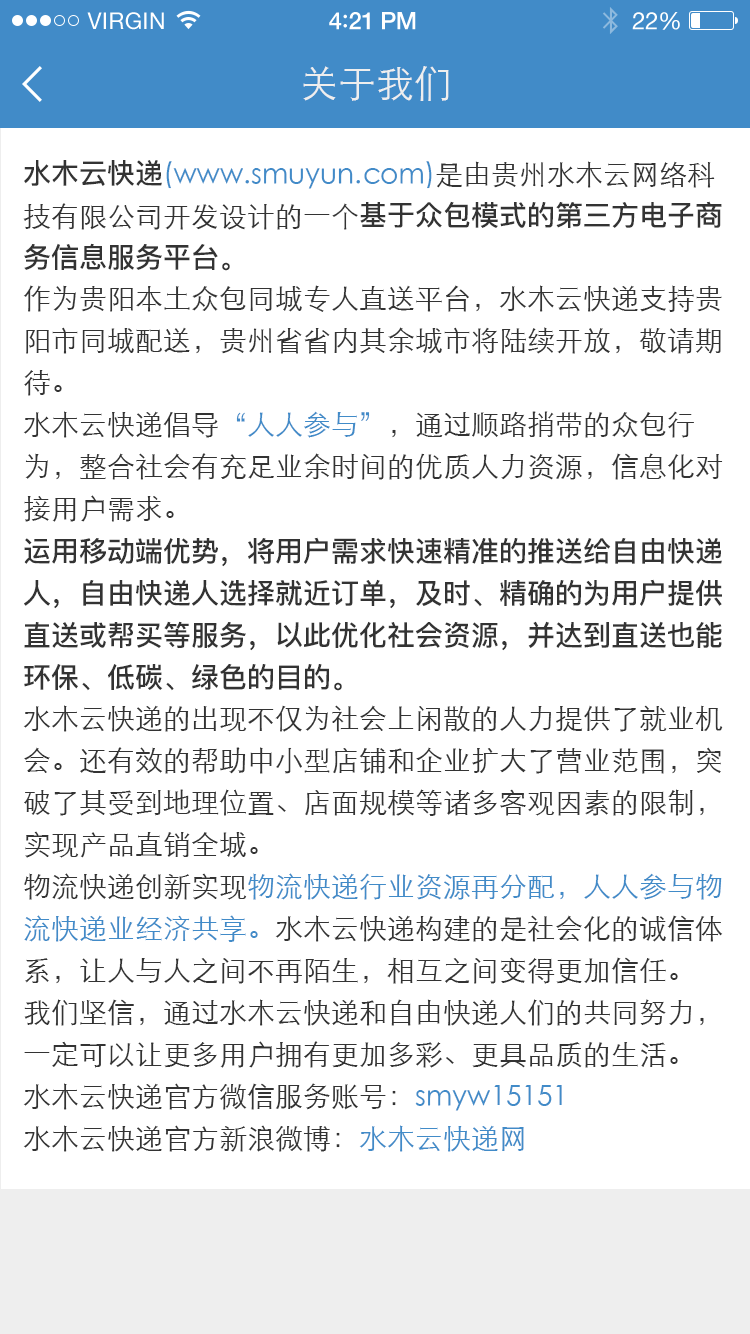
<style>
.page{position:relative;width:750px;height:1334px;background:#ffffff}
.page>*{position:absolute;margin:0}
.t1{font:23px "HelveticaNeue";letter-spacing:0.02em;color:#ffffff}
.t2{font:24px "HelveticaNeue-Medium";letter-spacing:-0.02em;color:#ffffff}
.t3{font:26px "Avenir-Medium";letter-spacing:-0.02em;color:#ffffff}
.t4{font:24px "HelveticaNeue";letter-spacing:-0.02em;color:#ffffff}
.t5{font:38px "STXihei";color:#eeeeee}
.t6{font:28px/42px "STXihei";color:#333333}
.t7{font:28px/42px "PingFang-SC-Bold";color:#333333}
.t8{font:28px/42px "STXihei";color:#418bc8}
</style>
<div class="page">
<p class="t1" style="left:87px;top:12px;width:77px;height:18px">VIRGIN</p>
<p class="t2" style="left:329px;top:12px;width:87px;height:18px">4<span class="t3">:</span>21 PM</p>
<p class="t4" style="left:632px;top:12px;width:48px;height:18px">22%</p>
<p class="t5" style="left:303px;top:66px;width:146px;height:35px">关于我们</p>
<p class="t6" style="left:23px;top:160px;width:700px;height:992px"><span class="t7">水木云快递</span><span class="t8">(www.smuyun.com)</span>是由贵州水木云网络科技有限公司开发设计的一个<span class="t7">基于众包模式的第三方电子商务信息服务平台。<br></span>作为贵阳本土众包同城专人直送平台，水木云快递支持贵阳市同城配送，贵州省省内其余城市将陆续开放，敬请期待。<br>水木云快递倡导<span class="t8">“人人参与”</span>，通过顺路捎带的众包行为，整合社会有充足业余时间的优质人力资源，信息化对接用户需求。<br><span class="t7">运用移动端优势，将用户需求快速精准的推送给自由快递人，自由快递人选择就近订单，及时、精确的为用户提供直送或帮买等服务，以此优化社会资源，并达到直送也能环保、低碳、绿色的目的。<br></span>水木云快递的出现不仅为社会上闲散的人力提供了就业机会。还有效的帮助中小型店铺和企业扩大了营业范围，突破了其受到地理位置、店面规模等诸多客观因素的限制，实现产品直销全城。<br>物流快递创新实现<span class="t8">物流快递行业资源再分配，人人参与物流快递业经济共享。</span>水木云快递构建的是社会化的诚信体系，让人与人之间不再陌生，相互之间变得更加信任。<br>我们坚信，通过水木云快递和自由快递人们的共同努力，一定可以让更多用户拥有更加多彩、更具品质的生活。<br>水木云快递官方微信服务账号：<span class="t8">smyw15151<br></span>水木云快递官方新浪微博：<span class="t8">水木云快递网</span></p>
</div>
